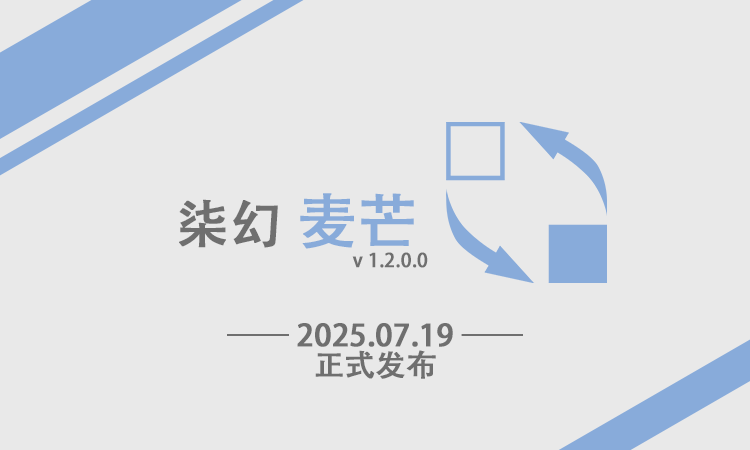
<style>
.page{position:relative;width:750px;height:450px;background:#e9e9e9}
.page>*{position:absolute;margin:0}
.t1{font:19px/60px "AdobeHeitiStd-Regular";color:#6f6f6f;font-weight:bold}
.t2{font:52px/60px "AdobeHeitiStd-Regular";color:#6f6f6f;font-weight:bold}
.t3{font:60px/60px "AdobeHeitiStd-Regular";color:#88abda;font-weight:bold}
.t4{font:30px/30px "AdobeHeitiStd-Regular";color:#6f6f6f;font-weight:bold}
</style>
<div class="page">
<p class="t1" style="left:179px;top:193px;width:249px;height:75px"><span class="t2">柒幻 </span><span class="t3">麦芒<br></span>v 1.2.0.0</p>
<p class="t4" style="left:227px;top:323px;width:296px;height:56px;text-align:center">—— 2025.07.19 ——<br>正式发布</p>
</div>
